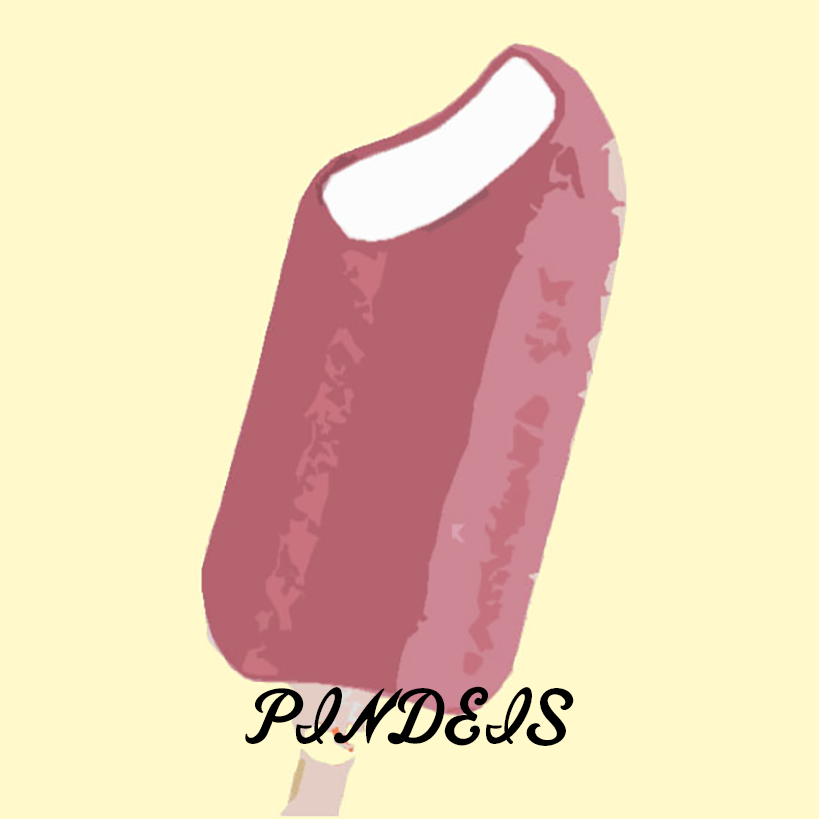
<style>
.page{position:relative;width:819px;height:819px;background:#fff9cb}
.page>*{position:absolute;margin:0}
.t1{font:72px "FenwayParkJF";letter-spacing:0.025em;color:#000000}
</style>
<div class="page">
<p class="t1" style="left:245px;top:686px;width:329px;height:60px">PINDEIS</p>
</div>
